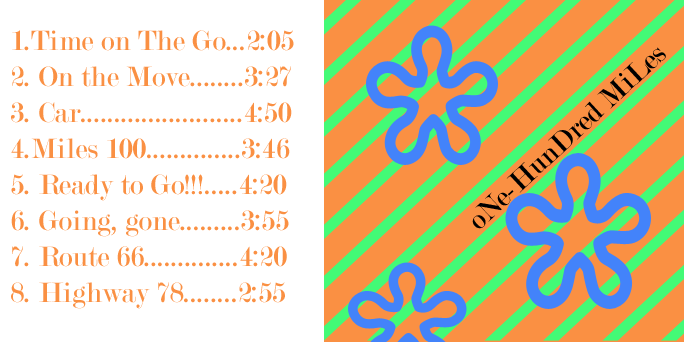
<style>
.page{position:relative;width:684px;height:342px;background:#ffffff}
.page>*{position:absolute;margin:0}
.t1{font:30px "Modern-Regular";color:#fa9043}
.t2{font:30px "Modern-Regular";color:#000000}
</style>
<div class="page">
<p class="t1" style="left:11px;top:30px;width:283px;height:279px">1.Time on The Go...2:05<br>2. On the Move........3:27<br>3. Car........................4:50<br>4.Miles 100..............3:46<br>5. Ready to Go!!!.....4:20<br>6. Going, gone.........3:55<br>7. Route 66..............4:20<br>8. Highway 78........2:55</p>
<p class="t2" style="left:472px;top:47px;width:194px;height:182px;rotate:-43deg">oNe-HunDred MiLes</p>
</div>
